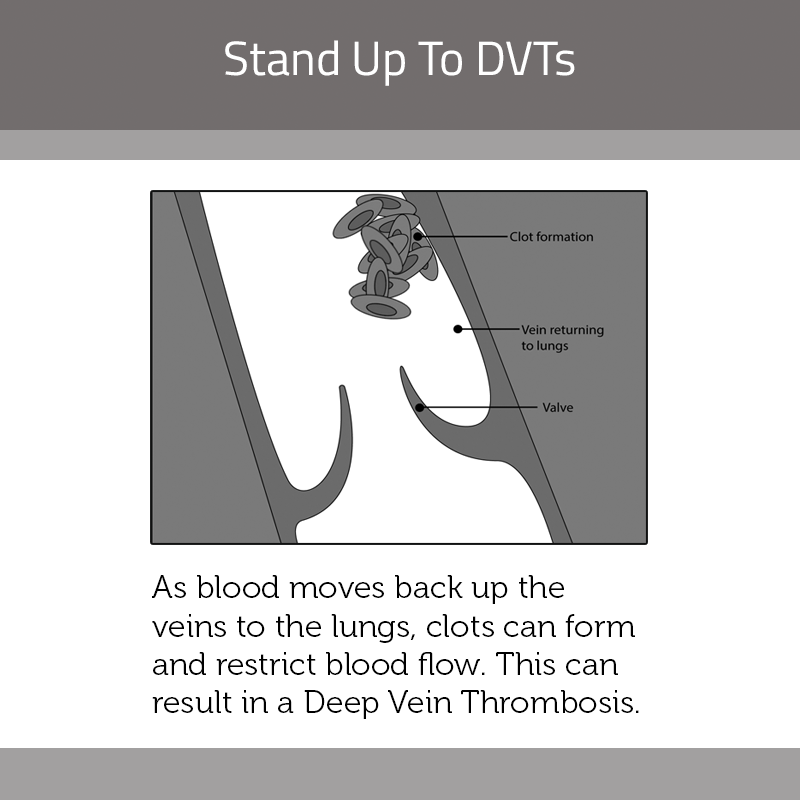
<style>
.page{position:relative;width:800px;height:800px;background:#ffffff}
.page>*{position:absolute;margin:0}
.t1{font:48px "TitilliumWeb-Regular";color:#ffffff}
.t2{font:32px "Museo-300";color:#000000}
</style>
<div class="page">
<p class="t1" style="left:225px;top:40px;width:350px;height:46px">Stand Up To DVTs</p>
<p class="t2" style="left:152px;top:575px;width:487px;height:144px">As blood moves back up the veins to the lungs, clots can form and restrict blood flow. This can result in a Deep Vein Thrombosis.</p>
</div>
